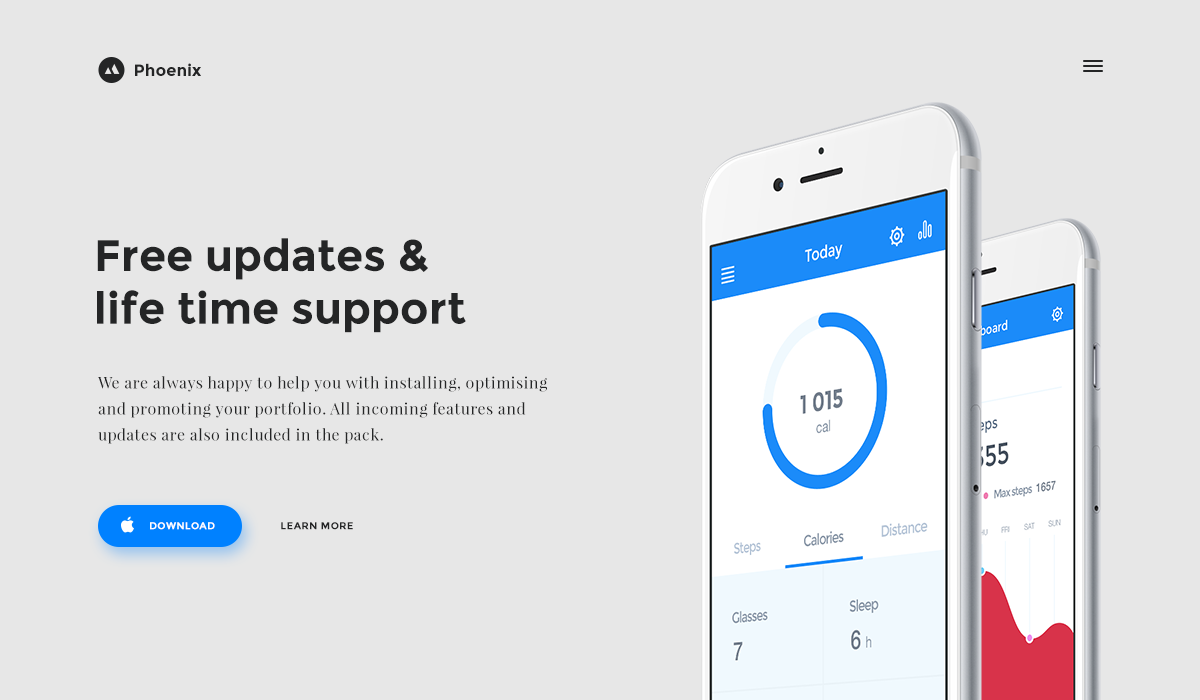
<style>
.page{position:relative;width:1200px;height:700px;background:#e7e7e7}
.page>*{position:absolute;margin:0}
.t1{font:16.4px "Montserrat-Bold";color:#242526}
.t2{font:44px "Montserrat-Bold";color:#242526}
.t3{font:16px/26px "PlayfairDisplay-Regular";letter-spacing:0.025em;color:#242526}
.t4{font:10px "Montserrat-Bold";letter-spacing:0.04em;color:#ffffff;text-transform:uppercase}
.t5{font:10px "Montserrat-Bold";letter-spacing:0.04em;color:#242526;text-transform:uppercase}
</style>
<div class="page">
<p class="t1" style="left:135px;top:63px;width:66px;height:13px">Phoenix</p>
<p class="t2" style="left:97px;top:238px;width:369px;height:95px">Free updates &amp; <br>life time support</p>
<p class="t3" style="left:98px;top:376px;width:449px;height:68px">We are always happy to help you with installing, optimising and promoting your portfolio. All incoming features and updates are also included in the pack.</p>
<p class="t4" style="left:150px;top:522px;width:65px;height:8px">download</p>
<p class="t5" style="left:281px;top:522px;width:72px;height:8px">Learn more</p>
</div>
